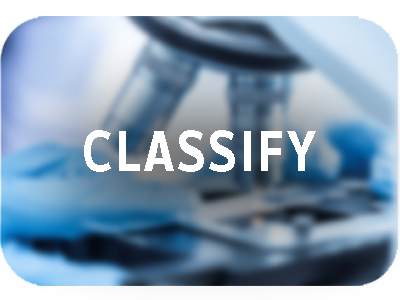
<style>
.page{position:relative;width:400px;height:300px}
.page>*{position:absolute;margin:0}
.t1{font:60px "Srinakharinwirot-Regular";letter-spacing:0.02em;color:#ffffff}
</style>
<div class="page">
<p class="t1" style="left:84px;top:130px;width:232px;height:42px">CLASSIFY</p>
</div>
